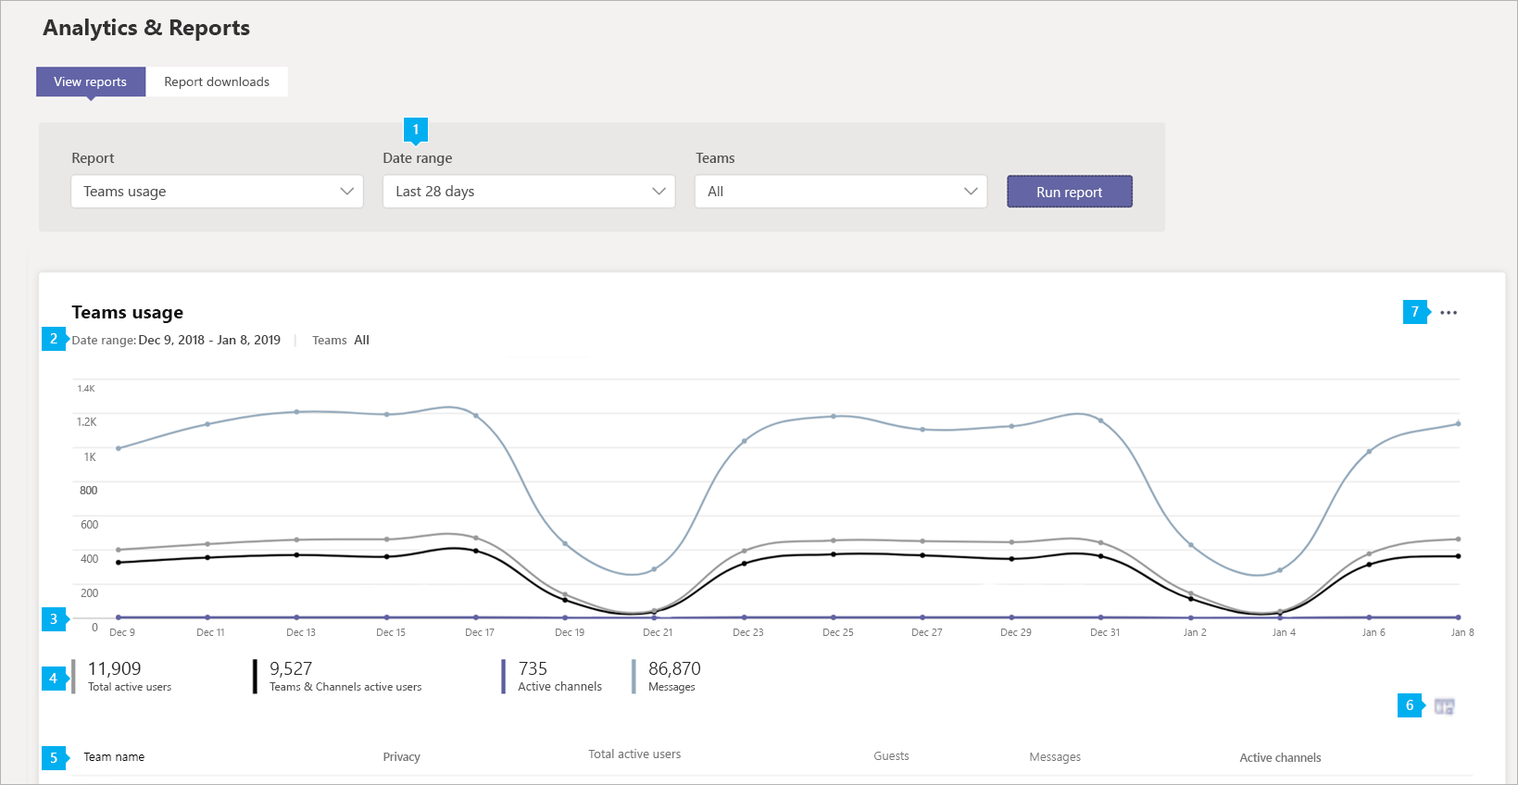
<style>
.page{position:relative;width:1518px;height:785px;background:#ffffff}
.page>*{position:absolute;margin:0}
.t1{font:22.2px "SegoeUI-Bold";color:#323131}
.t2{font:13.1px "SegoeUI";color:#ffffff}
.t3{font:13.1px "SegoeUI";color:#505050}
.t4{font:13.9px "SegoeUI-Semibold";color:#ffffff}
.t5{font:13.9px "SegoeUI-Semibold";color:#505050}
.t6{font:14.7px "SegoeUI";color:#505050}
.t7{font:13.9px "SegoeUI";color:#505050}
.t8{font:13.9px "SegoeUI";color:#ffffff}
.t9{font:18.8px "SegoeUI-Bold";color:#121212}
.t10{font:12.4px "SegoeUI-Semibold";color:#757575}
.t11{font:13px "SegoeUI-Semibold";color:#454444}
.t12{font:9.6px "SegoeUI";color:#757575}
.t13{font:10.8px "SegoeUI";color:#757575}
.t14{font:10.5px "SegoeUI-Semilight";color:#757575}
.t15{font:18.5px "SegoeUI";color:#272727}
.t16{font:18.5px "SegoeUI-Semilight";color:#272727}
.t17{font:11.1px "SegoeUI";color:#505050}
.t18{font:11.3px "SegoeUI";color:#505050}
.t19{font:12.4px "SegoeUI";color:#505050}
.t20{font:10.8px "SegoeUI";color:#505050}
.t21{font:12.4px "SegoeUI";color:#757575}
.t22{font:12.4px "SegoeUI-Semilight";color:#000000}
.t23{font:11.6px "SegoeUI-Semibold";color:#757575}
.t24{font:12.4px "SegoeUI-Semilight";color:#757575}
</style>
<div class="page">
<p class="t1" style="left:43px;top:19px;width:207px;height:22px">Analytics &amp; Reports</p>
<p class="t2" style="left:54px;top:77px;width:73px;height:12px">View reports</p>
<p class="t3" style="left:165px;top:77px;width:105px;height:12px">Report downloads</p>
<p class="t4" style="left:413px;top:124px;width:5px;height:10px">1</p>
<p class="t5" style="left:72px;top:153px;width:43px;height:13px">Report</p>
<p class="t5" style="left:383px;top:153px;width:69px;height:13px">Date range</p>
<p class="t5" style="left:696px;top:153px;width:39px;height:10px">Teams</p>
<p class="t6" style="left:396px;top:185px;width:78px;height:15px">Last 28 days</p>
<p class="t6" style="left:83px;top:186px;width:83px;height:14px">Teams usage</p>
<p class="t7" style="left:708px;top:186px;width:14px;height:10px">All</p>
<p class="t8" style="left:1037px;top:187px;width:65px;height:13px">Run report</p>
<p class="t9" style="left:71px;top:306px;width:112px;height:17px">Teams usage</p>
<p class="t4" style="left:1412px;top:307px;width:7px;height:10px">7</p>
<p class="t4" style="left:50px;top:333px;width:7px;height:11px">2</p>
<p class="t10" style="left:72px;top:336px;width:64px;height:11px">Date range:</p>
<p class="t11" style="left:139px;top:335px;width:142px;height:10px">Dec 9, 2018 - Jan 8, 2019</p>
<p class="t10" style="left:312px;top:336px;width:35px;height:9px">Teams</p>
<p class="t11" style="left:354px;top:335px;width:15px;height:10px">All</p>
<p class="t12" style="left:78px;top:385px;width:17px;height:7px">1.4K</p>
<p class="t13" style="left:77px;top:418px;width:20px;height:8px">1.2K</p>
<p class="t13" style="left:84px;top:453px;width:12px;height:8px">1K</p>
<p class="t13" style="left:80px;top:486px;width:17px;height:9px">800</p>
<p class="t13" style="left:80px;top:486px;width:17px;height:9px">800</p>
<p class="t13" style="left:81px;top:521px;width:17px;height:8px">600</p>
<p class="t13" style="left:81px;top:555px;width:17px;height:8px">400</p>
<p class="t13" style="left:81px;top:589px;width:17px;height:8px">200</p>
<p class="t4" style="left:50px;top:614px;width:7px;height:10px">3</p>
<p class="t13" style="left:92px;top:623px;width:6px;height:9px">0</p>
<p class="t14" style="left:110px;top:629px;width:25px;height:7px">Dec 9</p>
<p class="t14" style="left:197px;top:629px;width:27px;height:7px">Dec 11</p>
<p class="t14" style="left:287px;top:629px;width:29px;height:7px">Dec 13</p>
<p class="t14" style="left:377px;top:629px;width:29px;height:7px">Dec 15</p>
<p class="t14" style="left:466px;top:629px;width:29px;height:7px">Dec 17</p>
<p class="t14" style="left:556px;top:629px;width:28px;height:7px">Dec 19</p>
<p class="t14" style="left:644px;top:629px;width:28px;height:7px">Dec 21</p>
<p class="t14" style="left:734px;top:629px;width:29px;height:7px">Dec 23</p>
<p class="t14" style="left:823px;top:629px;width:31px;height:7px">Dec 25</p>
<p class="t14" style="left:912px;top:629px;width:31px;height:7px">Dec 27</p>
<p class="t14" style="left:1001px;top:629px;width:31px;height:7px">Dec 29</p>
<p class="t14" style="left:1091px;top:629px;width:29px;height:7px">Dec 31</p>
<p class="t14" style="left:1184px;top:629px;width:23px;height:7px">Jan 2</p>
<p class="t14" style="left:1273px;top:629px;width:23px;height:7px">Jan 4</p>
<p class="t14" style="left:1363px;top:629px;width:23px;height:7px">Jan 6</p>
<p class="t14" style="left:1451px;top:629px;width:24px;height:7px">Jan 8</p>
<p class="t15" style="left:89px;top:662px;width:52px;height:16px">11,909</p>
<p class="t16" style="left:270px;top:662px;width:42px;height:16px">9,527</p>
<p class="t16" style="left:519px;top:662px;width:27px;height:13px">735</p>
<p class="t16" style="left:649px;top:662px;width:51px;height:16px">86,870</p>
<p class="t4" style="left:49px;top:673px;width:8px;height:11px">4</p>
<p class="t17" style="left:88px;top:683px;width:83px;height:8px">Total active users</p>
<p class="t18" style="left:270px;top:683px;width:151px;height:8px">Teams &amp; Channels active users</p>
<p class="t19" style="left:518px;top:682px;width:84px;height:9px">Active channels</p>
<p class="t20" style="left:649px;top:683px;width:47px;height:11px">Messages</p>
<p class="t4" style="left:1406px;top:700px;width:7px;height:10px">6</p>
<p class="t21" style="left:588px;top:749px;width:93px;height:10px">Total active users</p>
<p class="t4" style="left:51px;top:753px;width:6px;height:10px">5</p>
<p class="t22" style="left:83px;top:753px;width:61px;height:8px">Team name</p>
<p class="t23" style="left:383px;top:752px;width:38px;height:12px">Privacy</p>
<p class="t24" style="left:874px;top:752px;width:36px;height:8px">Guests</p>
<p class="t24" style="left:1030px;top:753px;width:51px;height:11px">Messages</p>
<p class="t23" style="left:1239px;top:753px;width:83px;height:9px">Active channels</p>
</div>
